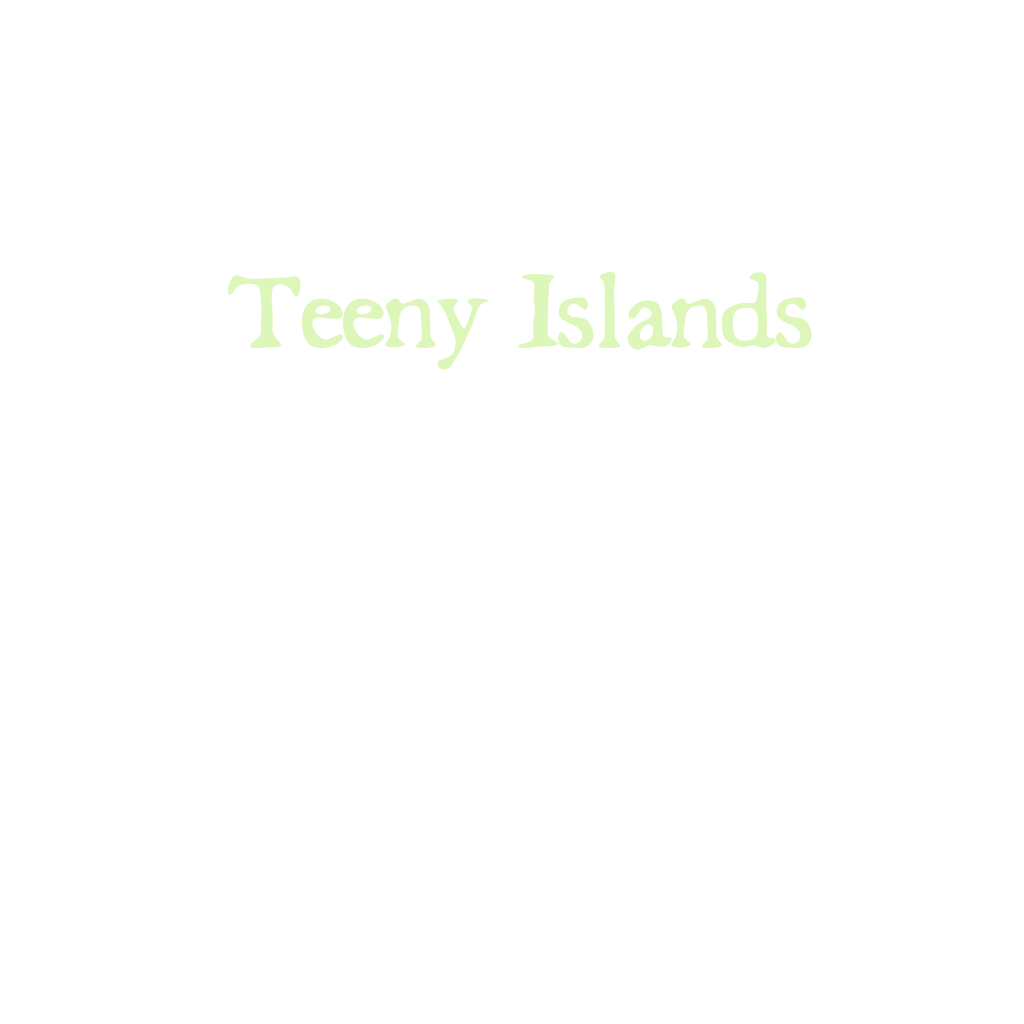
<style>
.page{position:relative;width:1024px;height:1024px;background:#ffffff}
.page>*{position:absolute;margin:0}
.t1{font:120px "Schrift";color:#ddf6b9}
</style>
<div class="page">
<p class="t1" style="left:228px;top:271px;width:584px;height:99px">Teeny Islands</p>
</div>
